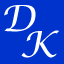
<style>
.page{position:relative;width:64px;height:64px;background:#0033cc}
.page>*{position:absolute;margin:0}
.t1{font:36px "LucidaCalligraphy-Italic";color:#ffffff}
</style>
<div class="page">
<p class="t1" style="left:4px;top:5px;width:32px;height:27px">D</p>
<p class="t1" style="left:21px;top:30px;width:38px;height:28px">K</p>
</div>
